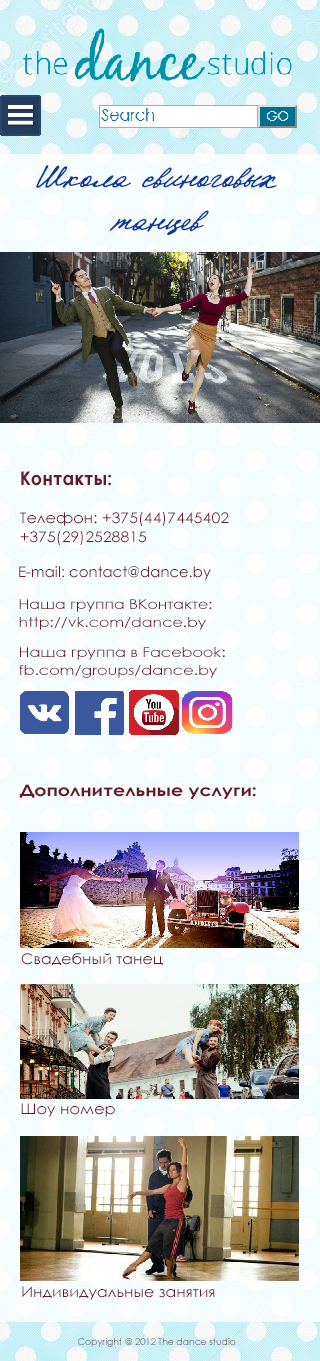
<style>
.page{position:relative;width:320px;height:1361px}
.page>*{position:absolute;margin:0}
.t1{font:33.1px "Katherine-Plus";color:#093999;scale:1.1 1}
.t2{font:18.7px "CenturyGothic-Bold";color:#631b29;scale:0.96 1}
.t3{font:14.8px "CenturyGothic";color:#631b29;scale:1.07 1}
.t4{font:14.8px "CenturyGothic";color:#631b29}
.t5{font:13.4px "CenturyGothic";color:#631b29;scale:1.18 1}
.t6{font:13.6px "CenturyGothic";color:#631b29;scale:1.17 1}
.t7{font:15.9px "CenturyGothic-Bold";color:#631b29;scale:1.19 1}
.t8{font:14.8px "CenturyGothic";color:#631b29;scale:1.08 1}
.t9{font:9.2px "CenturyGothic"}
</style>
<div class="page">
<p class="t1" style="left:36px;top:165px;width:241px;height:70px;text-align:center">Школа свиноговых<br><br>танцев</p>
<p class="t2" style="left:21px;top:471px;width:90px;height:15px">Контакты:</p>
<p class="t3" style="left:20px;top:512px;width:209px;height:33px">Телефон: +375(44)7445402<br><br>+375(29)2528815</p>
<p class="t4" style="left:19px;top:566px;width:192px;height:14px">E-mail: contact@dance.by</p>
<p class="t5" style="left:19px;top:599px;width:193px;height:31px">Наша группа ВКонтакте:<br><br>http://vk.com/dance.by</p>
<p class="t6" style="left:19px;top:647px;width:206px;height:31px">Наша группа в Facebook:<br><br>fb.com/groups/dance.by</p>
<p class="t7" style="left:19px;top:784px;width:237px;height:15px">Дополнительные услуги:</p>
<p class="t3" style="left:21px;top:953px;width:142px;height:13px">Свадебный танец</p>
<p class="t8" style="left:21px;top:1103px;width:94px;height:14px">Шоу номер</p>
<p class="t3" style="left:22px;top:1286px;width:193px;height:14px">Индивидуальные занятия</p>
<p class="t9" style="left:78px;top:1338px;width:158px;height:9px">Copyright @ 2012 The dance studio</p>
</div>
